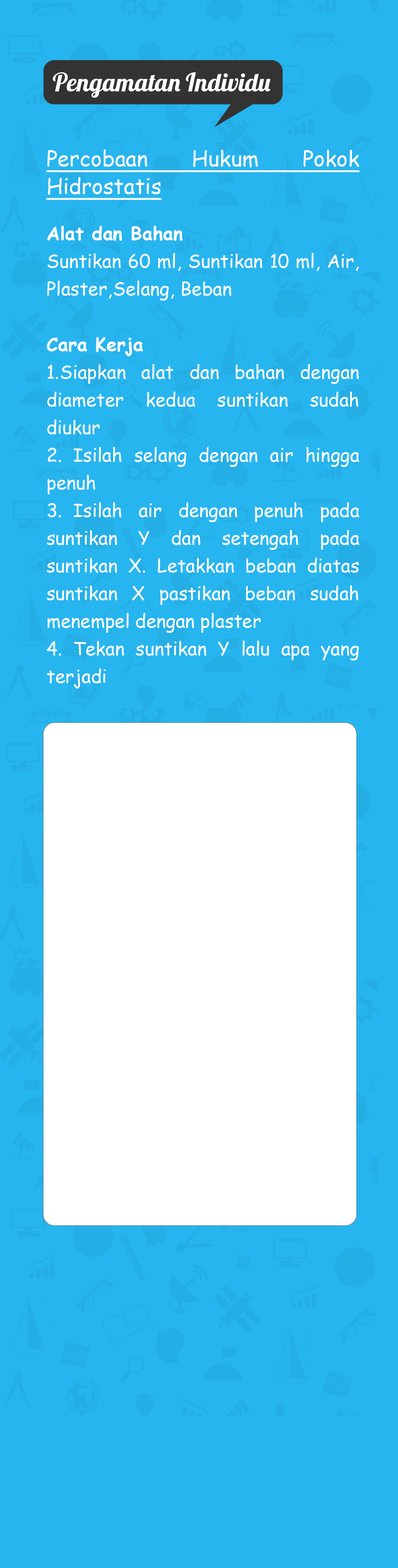
<style>
.page{position:relative;width:398px;height:1568px;background:#27b5ef}
.page>*{position:absolute;margin:0}
.t1{font:25.4px "Lobster-Regular";color:#ffffff}
.t2{font:18.4px/27.7px "ComicSansMS";color:#ffffff}
.t3{font:21.5px/27.7px "ComicSansMS";color:#ffffff;text-decoration:underline}
.t4{font:18.4px/27.7px "ComicSansMS-Bold";color:#ffffff}
</style>
<div class="page">
<p class="t1" style="left:53px;top:72px;width:218px;height:26px">Pengamatan Individu</p>
<p class="t2" style="left:46px;top:149px;width:314px;height:539px;text-align:justify"><span class="t3">Percobaan Hukum Pokok Hidrostatis<br><br></span><span class="t4">Alat dan Bahan <br></span>Suntikan 60 ml, Suntikan 10 ml, Air, Plaster, Selang, Beban <br><br><span class="t4">Cara Kerja<br></span>1. Siapkan alat dan bahan dengan diameter kedua suntikan sudah diukur<br>2. Isilah selang dengan air hingga penuh<br>3. Isilah air dengan penuh pada suntikan Y dan setengah pada suntikan X. Letakkan beban diatas suntikan X pastikan beban sudah menempel dengan plaster<br>4. Tekan suntikan Y lalu apa yang terjadi</p>
</div>
